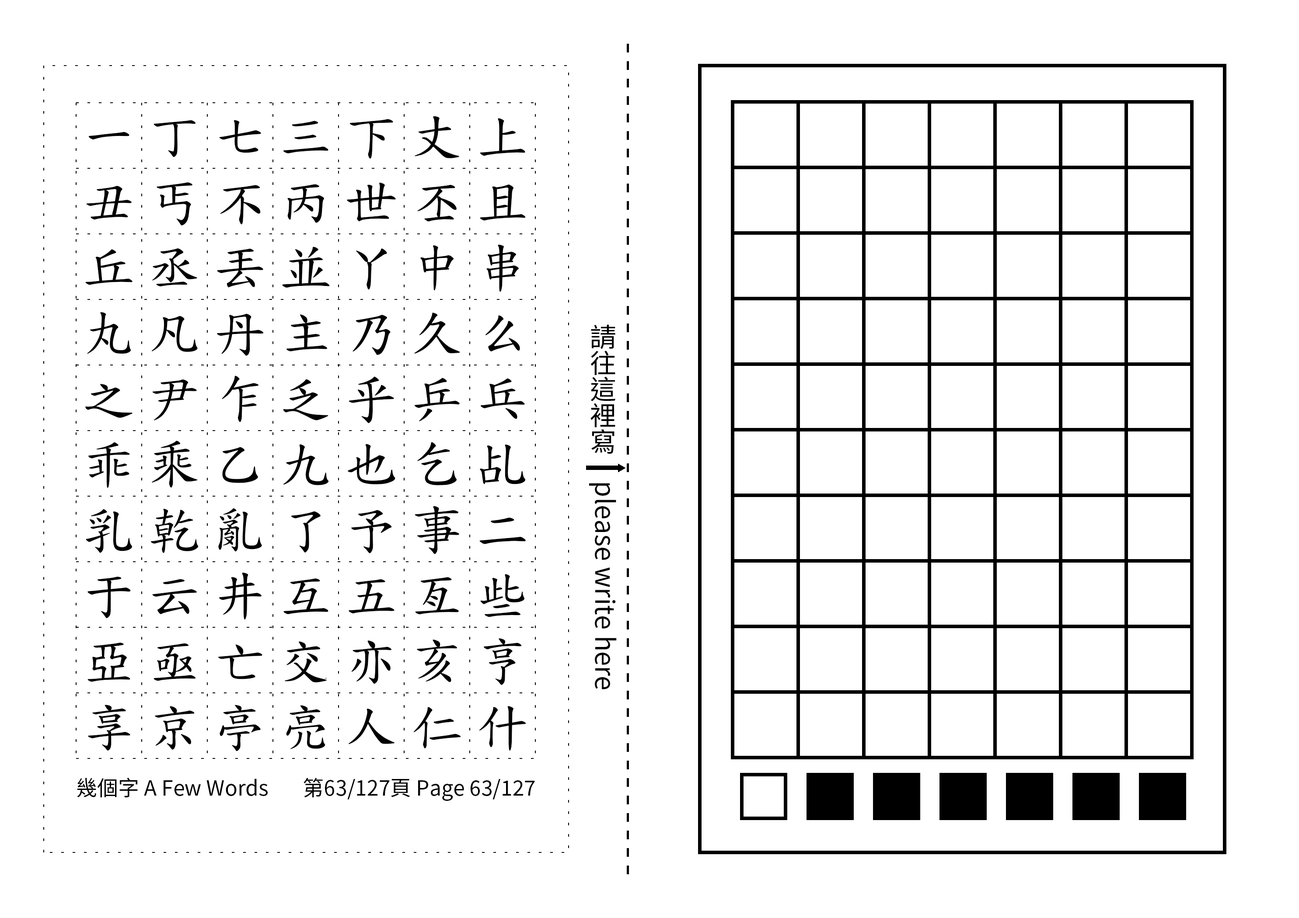
<style>
.page{position:relative;width:1299px;height:918px;background:#ffffff}
.page>*{position:absolute;margin:0}
.t1{font:52.5px/65.6px "TW-Kai-98_1";letter-spacing:0.25em;color:#000000}
.t2{font:26.2px "SourceHanSansTC-Regular";color:#000000}
.t3{font:21px "SourceHanSansTC-Regular";color:#000000}
</style>
<div class="page">
<p class="t1" style="left:85px;top:116px;width:441px;height:636px;text-align:center">一丁七三下丈上丑丐不丙世丕且丘丞丟並丫中串丸凡丹主乃久么之尹乍乏乎乒乓乖乘乙九也乞乩乳乾亂了予事二于云井互五亙些亞亟亡交亦亥亨享京亭亮人仁什</p>
<p class="t2" style="left:589px;top:324px;width:28px;height:366px;text-align:center">請往這裡寫　please write here</p>
<p class="t3" style="left:77px;top:778px;width:191px;height:20px">幾個字 A Few Words</p>
<p class="t3" style="left:303px;top:778px;width:232px;height:23px">第63/127頁 Page 63/127</p>
</div>
